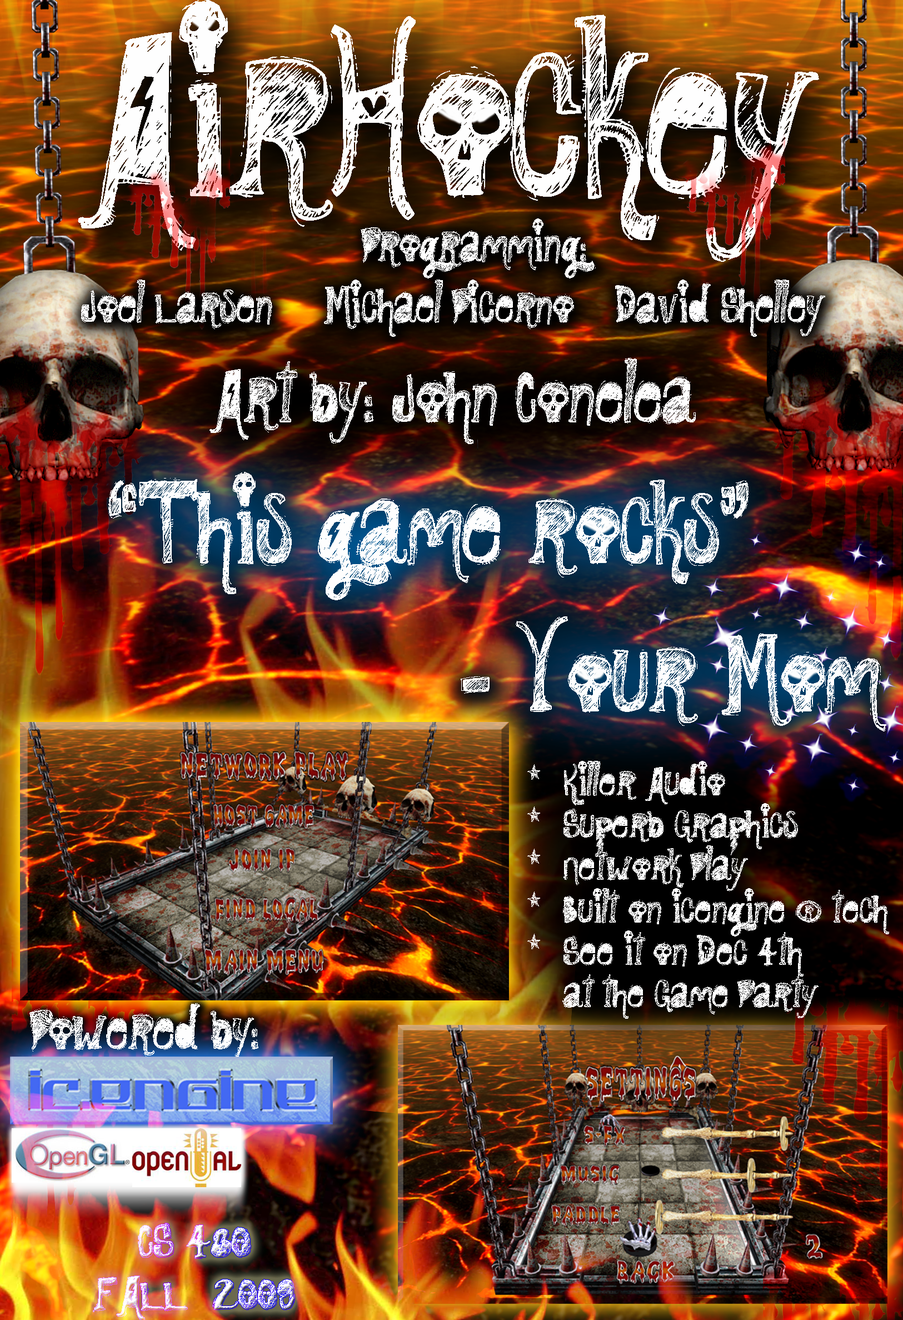
<style>
.page{position:relative;width:903px;height:1320px}
.page>*{position:absolute;margin:0}
.t1{font:42.6px/30.8px "RockShowWhiplash";color:#fefefe}
.t2{font:64.5px "RockShowWhiplash";color:#fefefe}
.t3{font:91.6px/24.8px "RockShowWhiplash";color:#fefefe}
.t4{font:34.4px/21.2px "RockShowWhiplash";color:#fefefe;scale:1.08 1}
.t5{font:50.1px "RockShowWhiplash";color:#fefefe}
.t6{font:40.7px/13px "RockShowWhiplash";scale:1.13 1}
</style>
<div class="page">
<p class="t1" style="left:81px;top:218px;width:744px;height:119px;text-align:center">Programming:<br><br>Joel Larsen  Michael Picerno David Shelley</p>
<p class="t2" style="left:210px;top:358px;width:486px;height:86px">Art by: John Conelea</p>
<p class="t3" style="left:108px;top:472px;width:779px;height:259px;text-align:justify">“This game rocks”<br><br><br><br><br><br>         - Your Mom</p>
<p class="t4" style="left:528px;top:761px;width:361px;height:258px;text-align:justify">* Killer Audio<br><br>* Superb Graphics<br><br>* Network Play<br><br>* Built on icengine ® tech<br><br>* See it on Dec 4th<br> <br> at the Game Party</p>
<p class="t5" style="left:29px;top:1003px;width:229px;height:63px">Powered by:</p>
<p class="t6" style="left:93px;top:1223px;width:202px;height:98px;text-align:center">CS 480<br><br><br><br>FALL  2009</p>
</div>
